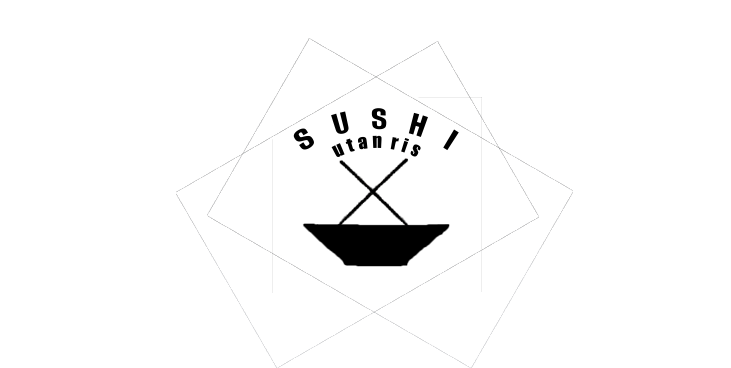
<style>
.page{position:relative;width:731px;height:368px;background:#ffffff}
.page>*{position:absolute;margin:0}
.t1{font:26px "Impact";color:#000000}
.t2{font:18px "Impact";color:#000000}
</style>
<div class="page">
<p class="t1" style="left:293px;top:108px;width:166px;height:43px">S    U    S    H    I</p>
<p class="t2" style="left:331px;top:135px;width:90px;height:22px">u t a n  r i s</p>
</div>
